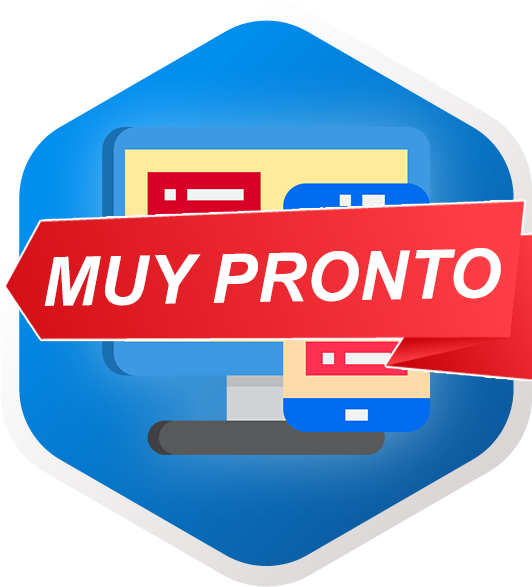
<style>
.page{position:relative;width:532px;height:587px;background:#ffffff}
.page>*{position:absolute;margin:0}
.t1{font:68.1px "Arial-BoldItalicMT";color:#ffffff}
</style>
<div class="page">
<p class="t1" style="left:44px;top:248px;width:457px;height:58px;rotate:-1deg">MUY PRONTO</p>
</div>
